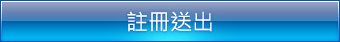
<style>
.page{position:relative;width:340px;height:42px}
.page>*{position:absolute;margin:0}
.t1{font:22px "MicrosoftJhengHeiRegular";color:#ffffff}
</style>
<div class="page">
<p class="t1" style="left:127px;top:11px;width:85px;height:21px">註冊送出</p>
</div>
